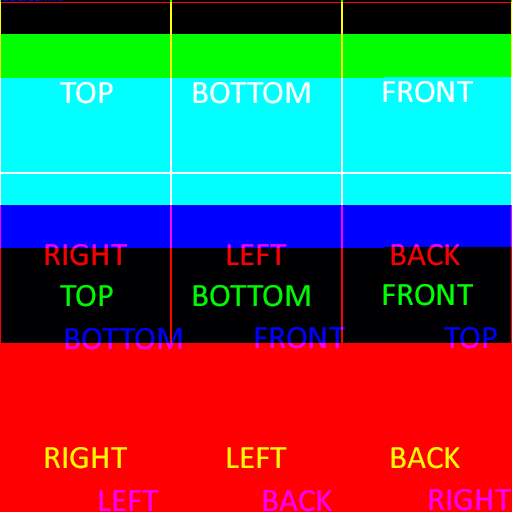
<style>
.page{position:relative;width:512px;height:512px;background:#ff0002}
.page>*{position:absolute;margin:0}
.t1{font:33px "Calibri"}
.t2{font:33px "Calibri";color:#ffffff}
</style>
<div class="page">
<p class="t1" style="left:60px;top:80px;width:53px;height:22px">TOP</p>
<p class="t1" style="left:193px;top:80px;width:117px;height:22px">BOTTOM</p>
<p class="t2" style="left:383px;top:79px;width:90px;height:22px">FRONT</p>
<p class="t1" style="left:45px;top:242px;width:82px;height:22px">RIGHT</p>
<p class="t1" style="left:227px;top:242px;width:60px;height:21px">LEFT</p>
<p class="t1" style="left:391px;top:242px;width:69px;height:22px">BACK</p>
</div>
